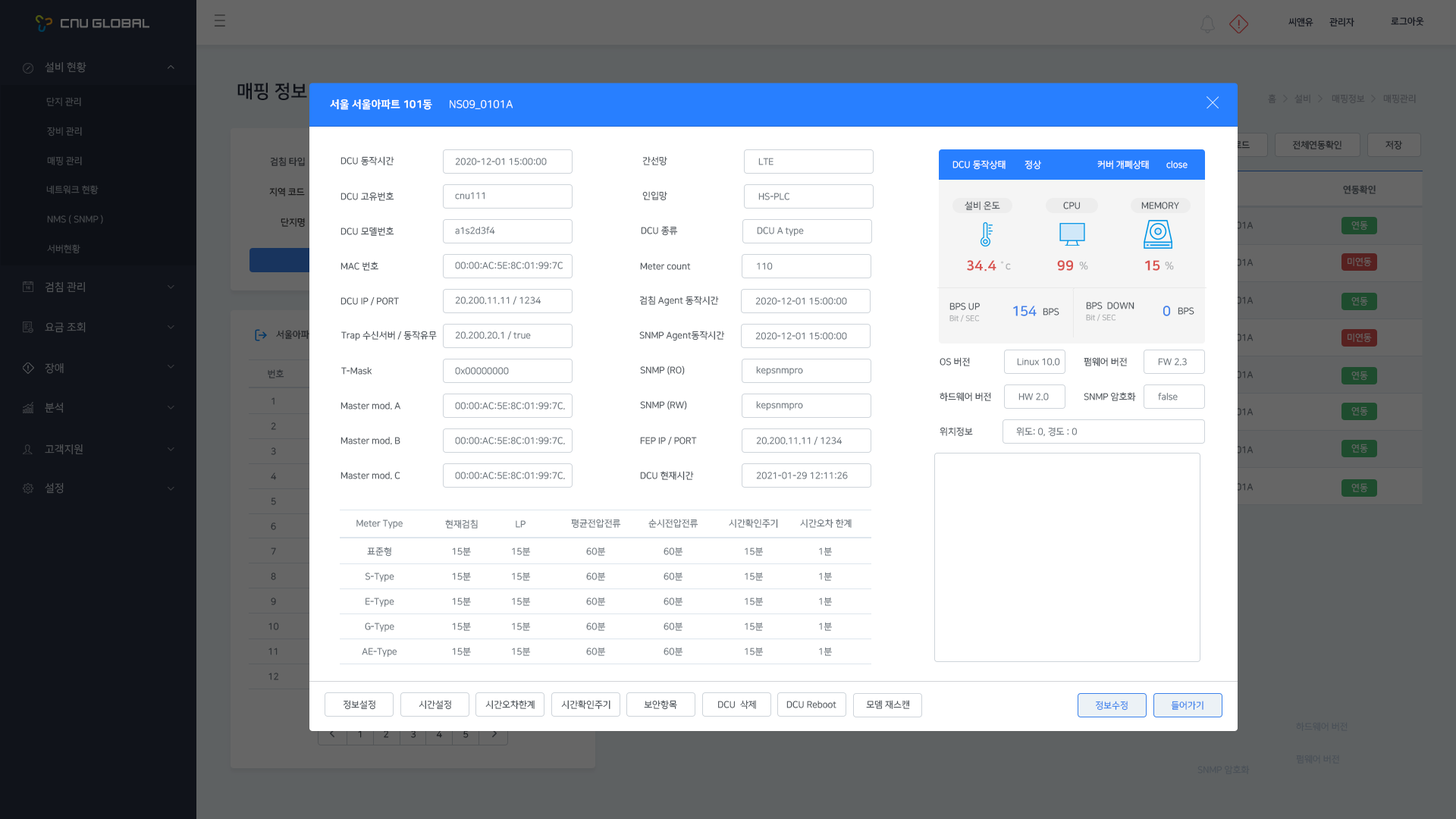
<style>
.page{position:relative;width:1456px;height:819px;background:#ffffff}
.page>*{position:absolute;margin:0}
.t1{font:10.6px "NanumSquareEB";color:#ffffff}
.t2{font:10.6px "NanumSquareR";color:#ffffff}
.t3{font:9.1px "NanumSquareR";color:#495057}
.t4{font:9.1px "NanumSquareR";color:#6c757d}
.t5{font:9.1px "NanumSquareR"}
.t6{font:9.1px "NanumSquareR";color:#ffffff}
.t7{font:13.6px "NanumSquareEB";color:#d9534f}
.t8{font:10.6px "NanumSquareB";color:#acafb1}
.t9{font:13.6px "NanumSquareB";color:#3f80ea}
.t10{font:7.6px "NanumSquareR"}
.t11{font:9.1px/25px "NanumSquareR";color:#6c757d}
.t12{font:9.1px/25px "NanumSquareR"}
.t13{font:9.1px "NanumSquareR";color:#3b82ec}
</style>
<div class="page">
<p class="t1" style="left:330px;top:99px;width:102px;height:11px">서울 서울아파트 101동</p>
<p class="t2" style="left:450px;top:99px;width:63px;height:10px">NS09_0101A</p>
<p class="t3" style="left:340px;top:156px;width:54px;height:10px">DCU 동작시간</p>
<p class="t4" style="left:455px;top:158px;width:92px;height:7px">2020-12-01 15:00:00</p>
<p class="t5" style="left:642px;top:156px;width:25px;height:10px">간선망</p>
<p class="t5" style="left:758px;top:158px;width:15px;height:7px">LTE</p>
<p class="t6" style="left:952px;top:160px;width:54px;height:10px">DCU 동작상태</p>
<p class="t6" style="left:1024px;top:160px;width:17px;height:10px">정상</p>
<p class="t6" style="left:1097px;top:160px;width:52px;height:10px">커버 개폐상태</p>
<p class="t6" style="left:1166px;top:161px;width:22px;height:7px">close</p>
<p class="t5" style="left:340px;top:192px;width:54px;height:9px">DCU 고유번호</p>
<p class="t5" style="left:455px;top:192px;width:30px;height:7px">cnu111</p>
<p class="t5" style="left:642px;top:191px;width:25px;height:10px">인입망</p>
<p class="t4" style="left:758px;top:193px;width:31px;height:7px">HS-PLC</p>
<p class="t5" style="left:965px;top:201px;width:35px;height:9px">설비 온도</p>
<p class="t5" style="left:1063px;top:202px;width:17px;height:7px">CPU</p>
<p class="t3" style="left:1141px;top:202px;width:38px;height:7px">MEMORY</p>
<p class="t5" style="left:340px;top:227px;width:54px;height:9px">DCU 모델번호</p>
<p class="t4" style="left:455px;top:227px;width:40px;height:7px">a1s2d3f4</p>
<p class="t5" style="left:641px;top:226px;width:37px;height:10px">DCU 종류</p>
<p class="t5" style="left:757px;top:227px;width:47px;height:10px">DCU A type</p>
<p class="t3" style="left:340px;top:262px;width:38px;height:9px">MAC 번호</p>
<p class="t4" style="left:455px;top:262px;width:108px;height:7px">00:00:AC:5E:8C:01:99:7C</p>
<p class="t3" style="left:640px;top:262px;width:51px;height:8px">Meter count</p>
<p class="t5" style="left:757px;top:262px;width:16px;height:8px">110</p>
<p class="t7" style="left:967px;top:260px;width:29px;height:11px">34.4</p>
<p class="t8" style="left:1001px;top:261px;width:10px;height:9px">˚c</p>
<p class="t7" style="left:1057px;top:260px;width:16px;height:11px">99</p>
<p class="t8" style="left:1079px;top:262px;width:9px;height:8px">%</p>
<p class="t7" style="left:1144px;top:260px;width:16px;height:11px">15</p>
<p class="t8" style="left:1165px;top:262px;width:9px;height:8px">%</p>
<p class="t3" style="left:340px;top:297px;width:59px;height:9px">DCU IP / PORT​</p>
<p class="t5" style="left:455px;top:296px;width:86px;height:9px">20.200.11.11 / 1234​</p>
<p class="t3" style="left:639px;top:296px;width:80px;height:10px">검침 Agent 동작시간</p>
<p class="t4" style="left:755px;top:297px;width:92px;height:8px">2020-12-01 15:00:00</p>
<p class="t5" style="left:949px;top:303px;width:31px;height:7px">BPS UP</p>
<p class="t9" style="left:1013px;top:306px;width:24px;height:10px">154</p>
<p class="t3" style="left:1086px;top:302px;width:48px;height:7px">BPS  DOWN</p>
<p class="t9" style="left:1163px;top:306px;width:8px;height:10px">0</p>
<p class="t10" style="left:949px;top:315px;width:31px;height:7px">Bit / SEC</p>
<p class="t5" style="left:1043px;top:308px;width:16px;height:7px">BPS</p>
<p class="t10" style="left:1086px;top:314px;width:30px;height:8px">Bit / SEC</p>
<p class="t5" style="left:1178px;top:307px;width:16px;height:8px">BPS</p>
<p class="t3" style="left:341px;top:331px;width:96px;height:10px">Trap 수신서버​ / 동작유무</p>
<p class="t5" style="left:455px;top:331px;width:76px;height:9px">20.200.20.1 / true​</p>
<p class="t3" style="left:639px;top:331px;width:86px;height:10px">SNMP Agent동작시간</p>
<p class="t4" style="left:755px;top:332px;width:92px;height:8px">2020-12-01 15:00:00</p>
<p class="t3" style="left:640px;top:366px;width:45px;height:9px">SNMP (RO)</p>
<p class="t3" style="left:940px;top:357px;width:30px;height:9px">OS 버전​</p>
<p class="t5" style="left:1017px;top:358px;width:43px;height:8px">Linux 10.0​</p>
<p class="t3" style="left:1084px;top:357px;width:43px;height:9px">펌웨어 버전​</p>
<p class="t4" style="left:1158px;top:358px;width:29px;height:8px">FW 2.3​</p>
<p class="t3" style="left:341px;top:367px;width:31px;height:8px">T-Mask</p>
<p class="t5" style="left:455px;top:367px;width:54px;height:8px">0x00000000</p>
<p class="t5" style="left:756px;top:366px;width:47px;height:10px">kepsnmpro</p>
<p class="t3" style="left:340px;top:402px;width:60px;height:7px">Master mod. A</p>
<p class="t4" style="left:455px;top:402px;width:110px;height:7px">00:00:AC:5E:8C:01:99:7C.</p>
<p class="t3" style="left:640px;top:400px;width:47px;height:10px">SNMP (RW)</p>
<p class="t5" style="left:756px;top:401px;width:47px;height:10px">kepsnmpro</p>
<p class="t3" style="left:940px;top:392px;width:51px;height:9px">하드웨어 버전​</p>
<p class="t5" style="left:1018px;top:393px;width:31px;height:7px">HW 2.0​</p>
<p class="t3" style="left:1084px;top:392px;width:52px;height:9px">SNMP 암호화​</p>
<p class="t4" style="left:1158px;top:393px;width:20px;height:7px">false​</p>
<p class="t3" style="left:340px;top:437px;width:60px;height:7px">Master mod. B</p>
<p class="t4" style="left:455px;top:437px;width:110px;height:7px">00:00:AC:5E:8C:01:99:7C.</p>
<p class="t5" style="left:640px;top:436px;width:57px;height:9px">FEP IP / PORT​</p>
<p class="t5" style="left:756px;top:436px;width:86px;height:9px">20.200.11.11 / 1234​</p>
<p class="t5" style="left:940px;top:427px;width:33px;height:10px">위치정보</p>
<p class="t4" style="left:1016px;top:427px;width:61px;height:10px">위도: 0, 경도 : 0</p>
<p class="t3" style="left:340px;top:472px;width:60px;height:7px">Master mod. C</p>
<p class="t4" style="left:455px;top:472px;width:110px;height:7px">00:00:AC:5E:8C:01:99:7C.</p>
<p class="t3" style="left:640px;top:471px;width:54px;height:9px">DCU 현재시간​</p>
<p class="t5" style="left:756px;top:472px;width:92px;height:7px">2021-01-29 12:11:26​</p>
<p class="t4" style="left:356px;top:519px;width:47px;height:10px">Meter Type​</p>
<p class="t5" style="left:445px;top:519px;width:33px;height:10px">현재검침</p>
<p class="t5" style="left:516px;top:520px;width:10px;height:8px">LP</p>
<p class="t4" style="left:571px;top:519px;width:50px;height:10px">평균전압전류</p>
<p class="t4" style="left:648px;top:519px;width:50px;height:9px">순시전압전류​</p>
<p class="t4" style="left:729px;top:519px;width:49px;height:9px">시간확인주기​</p>
<p class="t4" style="left:800px;top:519px;width:52px;height:9px">시간오차 한계​</p>
<p class="t11" style="left:362px;top:547px;width:35px;height:110px;text-align:center">표준형<br>S-Type​<br>E-Type​<br>G-Type<br>AE-Type​</p>
<p class="t11" style="left:452px;top:547px;width:19px;height:109px">15분<br>15분<br>15분<br>15분<br>15분</p>
<p class="t12" style="left:512px;top:547px;width:19px;height:109px">15분<br>15분<br>15분<br>15분<br>15분</p>
<p class="t12" style="left:586px;top:547px;width:20px;height:109px">60분<br>60분<br>60분<br>60분<br>60분</p>
<p class="t12" style="left:664px;top:547px;width:19px;height:109px">60분<br>60분<br>60분<br>60분<br>60분</p>
<p class="t12" style="left:745px;top:547px;width:19px;height:109px">15분<br>15분<br>15분<br>15분<br>15분</p>
<p class="t12" style="left:819px;top:547px;width:13px;height:109px">1분<br>1분<br>1분<br>1분<br>1분</p>
<p class="t3" style="left:344px;top:700px;width:31px;height:10px">정보설정</p>
<p class="t5" style="left:419px;top:700px;width:32px;height:10px">시간설정</p>
<p class="t3" style="left:485px;top:700px;width:50px;height:9px">시간오차한계</p>
<p class="t3" style="left:561px;top:700px;width:49px;height:9px">시간확인주기</p>
<p class="t3" style="left:644px;top:700px;width:33px;height:10px">보안항목</p>
<p class="t3" style="left:718px;top:700px;width:38px;height:9px">DCU  삭제</p>
<p class="t3" style="left:786px;top:701px;width:50px;height:7px">DCU Reboot</p>
<p class="t3" style="left:866px;top:700px;width:44px;height:9px">모뎀 재스캔</p>
<p class="t13" style="left:1096px;top:701px;width:32px;height:10px">정보수정</p>
<p class="t13" style="left:1171px;top:701px;width:32px;height:9px">들어가기</p>
<p class="t3" style="left:1296px;top:722px;width:52px;height:9px">하드웨어 버전</p>
<p class="t3" style="left:1296px;top:755px;width:43px;height:9px">펌웨어 버전</p>
<p class="t3" style="left:1197px;top:765px;width:53px;height:9px">SNMP 암호화</p>
</div>
